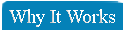
<style>
.page{position:relative;width:123px;height:30px;background:#0481b8}
.page>*{position:absolute;margin:0}
.t1{font:20px "TimesNewRomanPSMT";color:#fafafa}
</style>
<div class="page">
<p class="t1" style="left:9px;top:9px;width:106px;height:18px">Why It Works</p>
</div>
